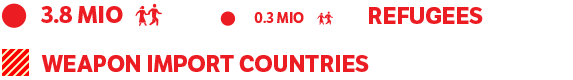
<style>
.page{position:relative;width:573px;height:80px;background:#ffffff}
.page>*{position:absolute;margin:0}
.t1{font:23px "LFTEtica-Bold";color:#ec1c23}
</style>
<div class="page">
<p class="t1" style="left:369px;top:7px;width:114px;height:17px">REFUGEES</p>
<p class="t1" style="left:41px;top:55px;width:328px;height:17px">WEAPON IMPORT COUNTRIES</p>
</div>
